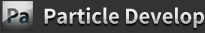
<style>
.page{position:relative;width:205px;height:33px;background:#333333}
.page>*{position:absolute;margin:0}
.t1{font:20px "SourceHanSansJP-Bold"}
</style>
<div class="page">
<p class="t1" style="left:44px;top:7px;width:160px;height:21px">Particle Develop</p>
</div>
